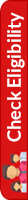
<style>
.page{position:relative;width:28px;height:200px;background:#d81414}
.page>*{position:absolute;margin:0}
.t1{font:18.2px "Lato-Bold";color:#fefefe}
</style>
<div class="page">
<p class="t1" style="left:7px;top:12px;width:18px;height:130px;rotate:-90deg">Check Eligibility</p>
</div>
